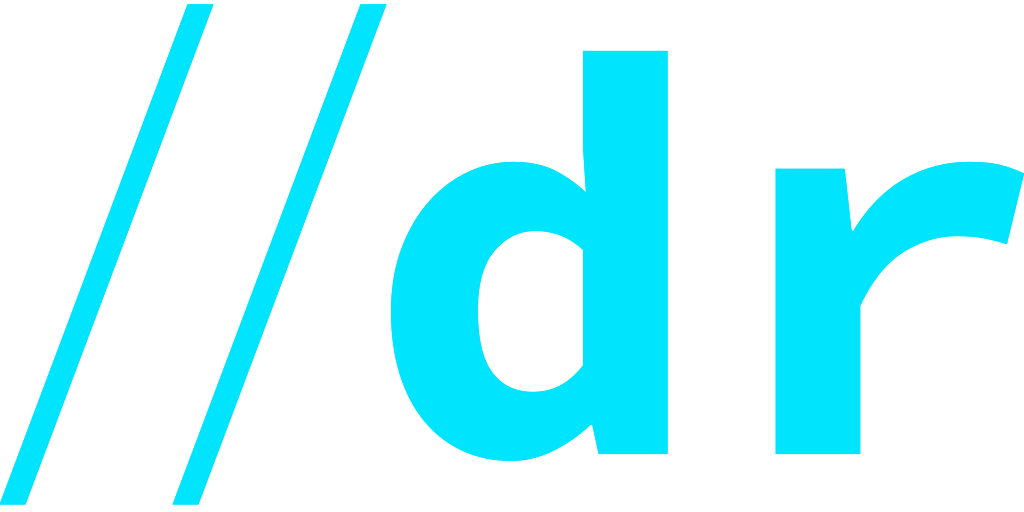
<style>
.page{position:relative;width:1024px;height:512px;background:#ffffff}
.page>*{position:absolute;margin:0}
.t1{font:575px "SourceCodePro-Light";letter-spacing:-0.3em;color:#00e4fe}
.t2{font:575px "SourceCodePro-Bold";color:#00e4fe}
</style>
<div class="page">
<p class="t1" style="left:0px;top:4px;width:387px;height:501px">//</p>
<p class="t1" style="left:0px;top:4px;width:387px;height:501px">//</p>
<p class="t2" style="left:391px;top:50px;width:634px;height:411px">dr</p>
<p class="t2" style="left:391px;top:50px;width:634px;height:411px">dr</p>
</div>
